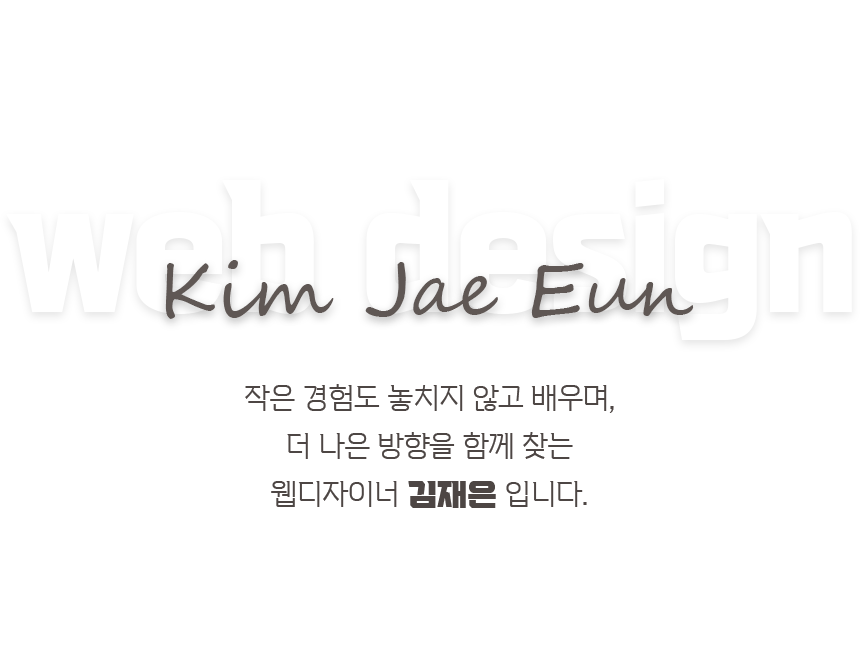
<style>
.page{position:relative;width:865px;height:671px;background:#ffffff}
.page>*{position:absolute;margin:0}
.t1{font:75px "SegoeScript";color:#5f5754}
.t2{font:30px/48px "VITRO-PRIDE-TTF";color:#4d4644}
.t3{font:30px/48px "VITRO-CORE-TTF";color:#4d4644}
</style>
<div class="page">
<p class="t1" style="left:165px;top:260px;width:529px;height:59px">Kim Jae Eun</p>
<p class="t2" style="left:245px;top:384px;width:369px;height:124px;text-align:center">작은 경험도 놓치지 않고 배우며,<br>더 나은 방향을 함께 찾는<br>웹디자이너 <span class="t3">김재은</span> 입니다.</p>
</div>
